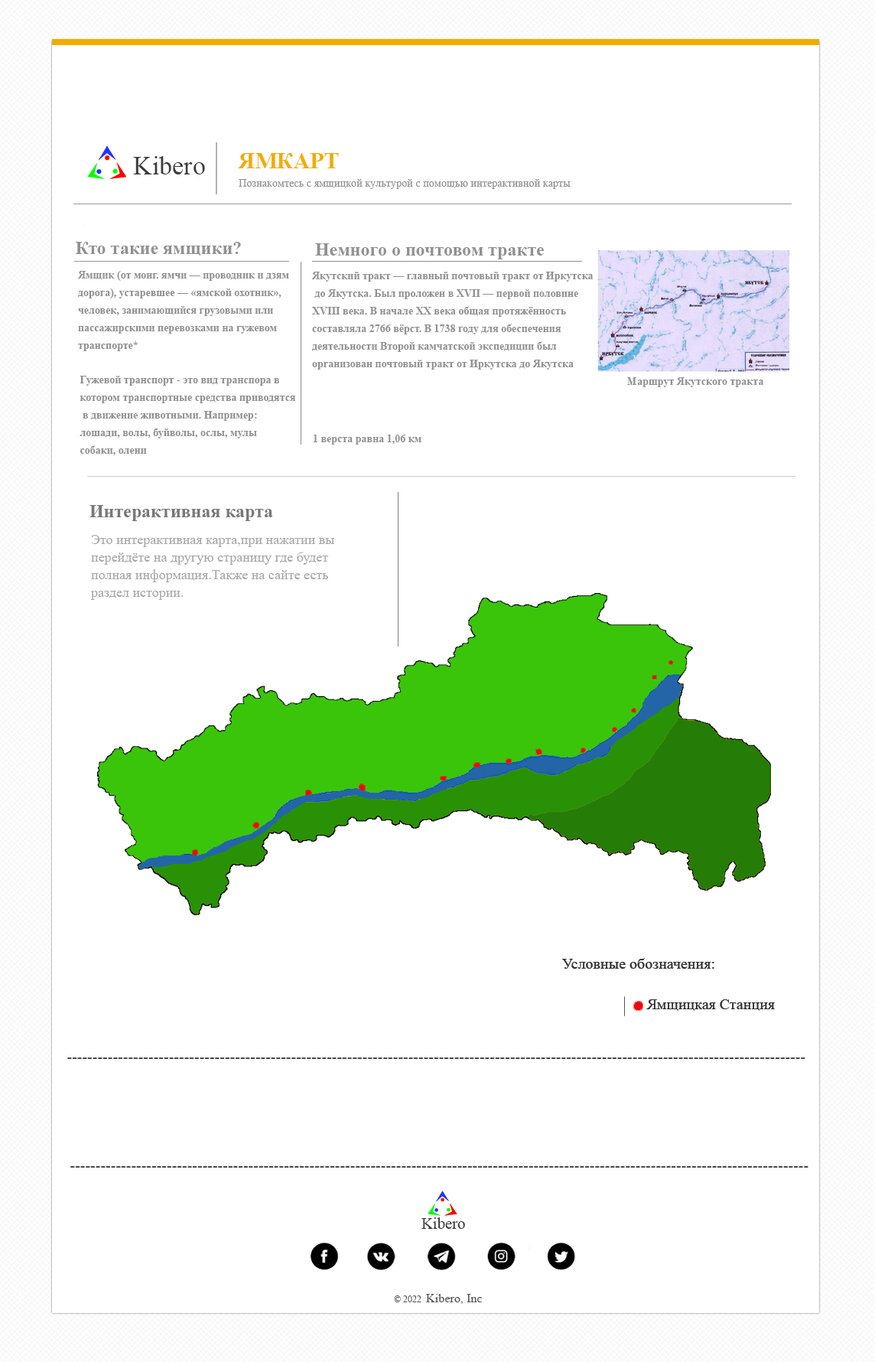
<style>
.page{position:relative;width:875px;height:1362px;background:#ffffff}
.page>*{position:absolute;margin:0}
.t1{font:18.4px "TimesNewRomanPS-BoldMT";color:#919191}
.t2{font:10.7px/17.6px "TimesNewRomanPS-BoldMT";color:#919191}
.t3{font:10.7px "TimesNewRomanPS-BoldMT";color:#919191}
</style>
<div class="page">
<p class="t1" style="left:76px;top:242px;width:165px;height:14px">Кто такие ямщики?</p>
<p class="t1" style="left:315px;top:243px;width:229px;height:16px">Немного о почтовом тракте</p>
<p class="t2" style="left:77px;top:271px;width:212px;height:80px">Ямщик (от монг. ямчи — проводник и дзям <br>дорога), устаревшее — «ямской охотник», <br>человек, занимающийся грузовыми или <br>пассажирскими перевозками на гужевом<br>транспорте*</p>
<p class="t2" style="left:311px;top:272px;width:283px;height:98px">Яку́тский тракт — главный почтовый тракт от Иркутска<br> до Якутска. Был проложен в XVII — первой половине<br>XVIII века. В начале XX века общая протяжённость<br>составляла 2766 вёрст. В 1738 году для обеспечения<br>деятельности Второй камчатской экспедиции был<br>организован почтовый тракт от Иркутска до Якутска</p>
<p class="t2" style="left:80px;top:376px;width:216px;height:79px">Гужевой транспорт - это вид транспора в<br>котором транспортные средства приводятся<br> в движение животными. Например:<br>лошади, волы, буйволы, ослы, мулы<br>собаки, олени</p>
<p class="t3" style="left:627px;top:377px;width:137px;height:10px">Маршрут Якутского тракта</p>
<p class="t3" style="left:313px;top:435px;width:109px;height:10px">1 верста равна 1,06 км</p>
</div>
